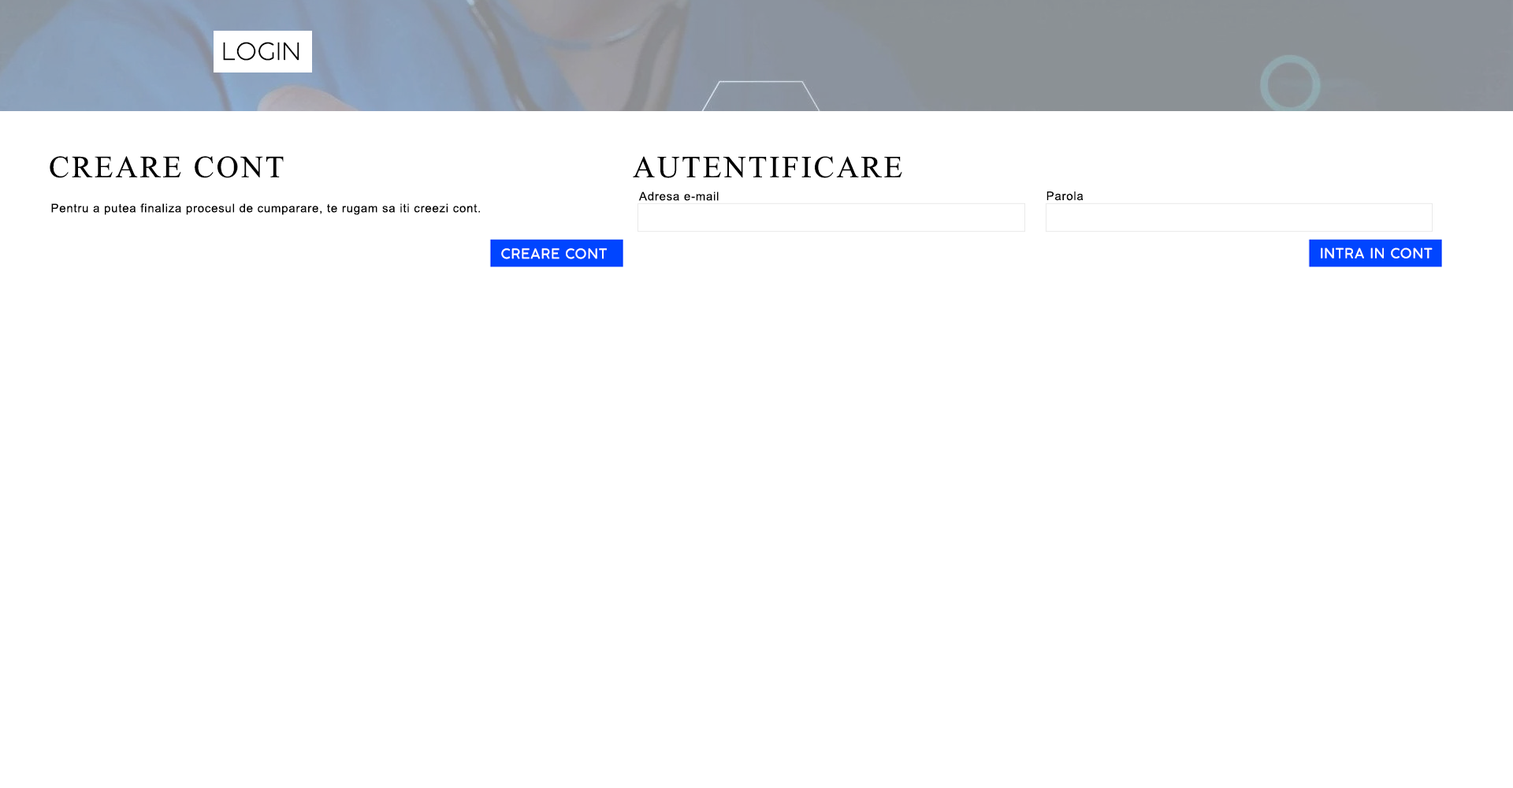
<style>
.page{position:relative;width:1513px;height:788px;background:#ffffff}
.page>*{position:absolute;margin:0}
.t1{font:23.7px "COCOGOOSE-UltraLight";letter-spacing:0.025em;color:#000000}
.t2{font:45.8px "Microsoft-Himalaya";letter-spacing:0.05em;color:#000000}
.t3{font:11.8px "ArialMT";letter-spacing:0.05em;color:#000000}
.t4{font:13.5px "Cocogoose-Light";letter-spacing:0.05em;color:#ffffff}
</style>
<div class="page">
<p class="t1" style="left:223px;top:42px;width:76px;height:19px">LOGIN</p>
<p class="t2" style="left:50px;top:156px;width:234px;height:22px">CREARE CONT</p>
<p class="t2" style="left:633px;top:156px;width:269px;height:22px">AUTENTIFICARE</p>
<p class="t3" style="left:638px;top:192px;width:81px;height:9px">Adresa e-mail</p>
<p class="t3" style="left:1047px;top:192px;width:37px;height:9px">Parola</p>
<p class="t3" style="left:51px;top:203px;width:429px;height:12px">Pentru a putea finaliza procesul de cumparare, te rugam sa iti creezi cont.</p>
<p class="t4" style="left:501px;top:248px;width:106px;height:11px">CREARE CONT</p>
<p class="t4" style="left:1321px;top:247px;width:112px;height:11px">INTRA IN CONT</p>
</div>
